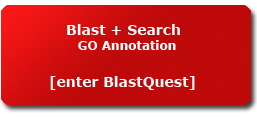
<style>
.page{position:relative;width:257px;height:118px}
.page>*{position:absolute;margin:0}
.t1{font:14px "Verdana-Bold";color:#ffffff}
.t2{font:12px "Verdana-Bold";color:#ffffff}
</style>
<div class="page">
<p class="t1" style="left:67px;top:24px;width:113px;height:11px">Blast + Search</p>
<p class="t2" style="left:78px;top:40px;width:98px;height:10px">GO Annotation</p>
<p class="t1" style="left:50px;top:76px;width:145px;height:14px">[enter BlastQuest]</p>
</div>
